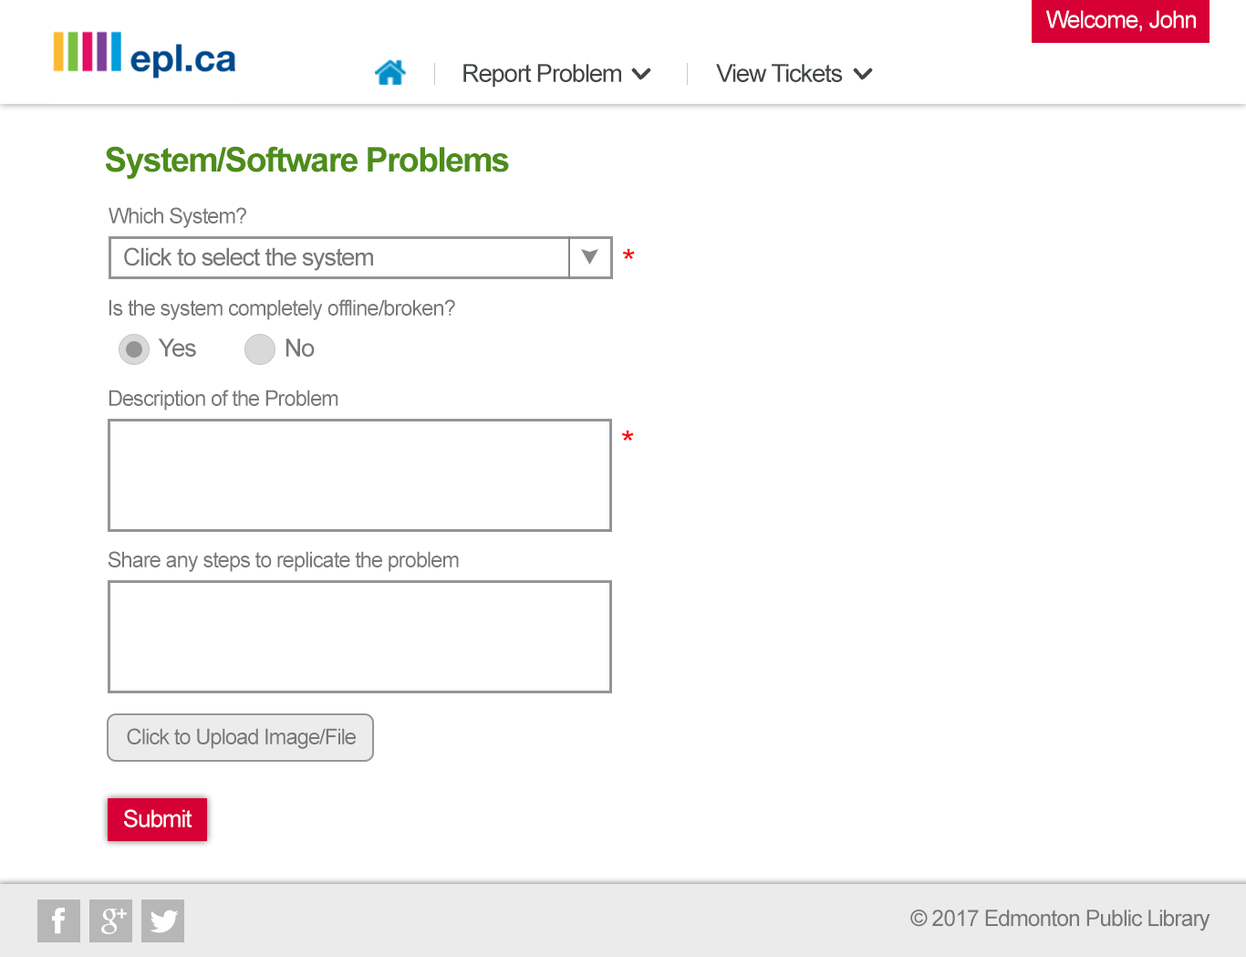
<style>
.page{position:relative;width:1246px;height:957px;background:#ffffff}
.page>*{position:absolute;margin:0}
.t1{font:23.7px "ArialMT";letter-spacing:-0.04em;color:#ffffff}
.t2{font:24.9px "ArialMT";letter-spacing:-0.04em;color:#414546}
.t3{font:33.9px "Arial-BoldMT";letter-spacing:-0.04em;color:#4d8d1a}
.t4{font:21.5px "ArialMT";letter-spacing:-0.04em;color:#767979}
.t5{font:24.4px "ArialMT";letter-spacing:-0.04em;color:#767979}
.t6{font:33.9px "ArialMT";letter-spacing:-0.04em;color:#ff0000}
.t7{font:24.9px "ArialMT";letter-spacing:-0.04em;color:#767979}
.t8{font:21.6px "ArialMT";letter-spacing:-0.04em;color:#767979}
.t9{font:22.6px "ArialMT";letter-spacing:-0.04em;color:#767979}
</style>
<div class="page">
<p class="t1" style="left:1046px;top:10px;width:150px;height:22px">Welcome, John</p>
<p class="t2" style="left:463px;top:64px;width:158px;height:24px">Report Problem</p>
<p class="t2" style="left:716px;top:64px;width:127px;height:18px">View Tickets</p>
<p class="t3" style="left:105px;top:146px;width:404px;height:33px">System/Software Problems</p>
<p class="t4" style="left:109px;top:207px;width:137px;height:21px">Which System?</p>
<p class="t5" style="left:124px;top:247px;width:249px;height:24px">Click to select the system</p>
<p class="t6" style="left:622px;top:248px;width:13px;height:11px">*</p>
<p class="t4" style="left:109px;top:299px;width:346px;height:21px">Is the system completely offline/broken?</p>
<p class="t7" style="left:158px;top:338px;width:38px;height:19px">Yes</p>
<p class="t7" style="left:286px;top:338px;width:29px;height:19px">No</p>
<p class="t4" style="left:109px;top:390px;width:229px;height:21px">Description of the Problem</p>
<p class="t6" style="left:621px;top:430px;width:13px;height:11px">*</p>
<p class="t4" style="left:108px;top:551px;width:351px;height:21px">Share any steps to replicate the problem</p>
<p class="t8" style="left:127px;top:728px;width:229px;height:21px">Click to Upload Image/File</p>
<p class="t1" style="left:124px;top:809px;width:68px;height:18px">Submit</p>
<p class="t9" style="left:910px;top:909px;width:301px;height:22px">© 2017 Edmonton Public Library</p>
</div>
